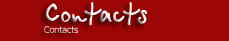
<style>
.page{position:relative;width:229px;height:41px;background:#9c0505}
.page>*{position:absolute;margin:0}
.t1{font:30px "BetinaScriptBold"}
.t2{font:9px "Tahoma"}
</style>
<div class="page">
<p class="t1" style="left:44px;top:2px;width:103px;height:31px">Contacts<br><span class="t2">Contacts</span></p>
</div>
